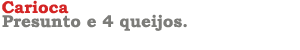
<style>
.page{position:relative;width:300px;height:50px;background:#ffffff}
.page>*{position:absolute;margin:0}
.t1{font:17px "BookmanOldStyle-Bold";color:#d42525}
.t2{font:17px "BookmanOldStyle-Bold";color:#7c7c79}
</style>
<div class="page">
<p class="t1" style="left:2px;top:0px;width:67px;height:14px">Carioca</p>
<p class="t2" style="left:2px;top:14px;width:185px;height:17px">Presunto e 4 queijos.</p>
</div>
